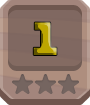
<style>
.page{position:relative;width:90px;height:105px}
.page>*{position:absolute;margin:0}
.t1{font:48px "Bungee-Regular"}
</style>
<div class="page">
<p class="t1" style="left:32px;top:21px;width:26px;height:35px">1</p>
</div>
